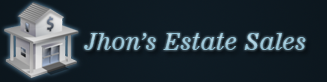
<style>
.page{position:relative;width:327px;height:82px}
.page>*{position:absolute;margin:0}
.t1{font:23px "News701BT-ItalicA";color:#9ec8d9}
</style>
<div class="page">
<p class="t1" style="left:84px;top:33px;width:222px;height:17px">Jhon’s Estate Sales</p>
</div>
